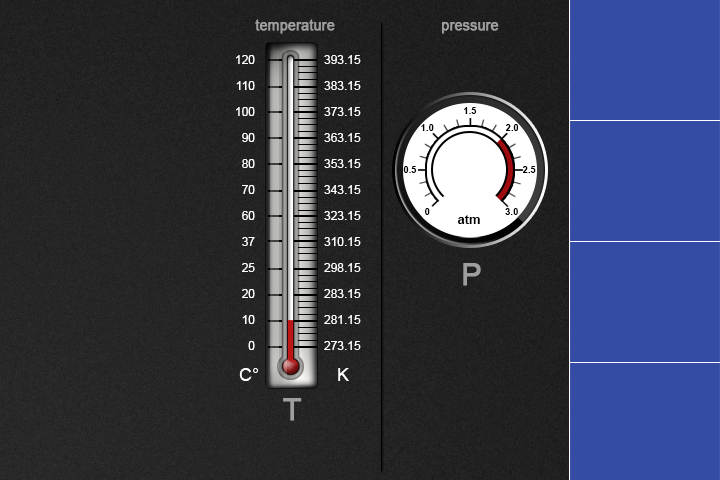
<style>
.page{position:relative;width:720px;height:480px;background:#344ca4}
.page>*{position:absolute;margin:0}
.t1{font:14px "ArialMT";color:#9f9d9d;font-weight:bold}
.t2{font:12px/26px "ArialMT";color:#ffffff}
.t3{font:9.5px "Arial-BoldMT";color:#000000}
.t4{font:13.1px "Arial-BoldMT";color:#000000}
.t5{font:30px "ArialMT";color:#9f9d9d;font-weight:bold}
.t6{font:18px "ArialMT";color:#ffffff}
</style>
<div class="page">
<p class="t1" style="left:255px;top:19px;width:80px;height:15px">temperature</p>
<p class="t1" style="left:442px;top:22px;width:57px;height:12px">pressure</p>
<p class="t2" style="left:236px;top:55px;width:19px;height:295px;text-align:right">120<br>110<br>100<br>90<br>80<br>70<br>60<br>37<br>25<br>20<br>10<br>0</p>
<p class="t2" style="left:324px;top:55px;width:37px;height:295px">393.15<br>383.15<br>373.15<br>363.15<br>353.15<br>343.15<br>323.15<br>310.15<br>298.15<br>283.15<br>281.15<br>273.15</p>
<p class="t3" style="left:464px;top:107px;width:13px;height:7px">1.5</p>
<p class="t3" style="left:421px;top:124px;width:13px;height:7px">1.0</p>
<p class="t3" style="left:505px;top:124px;width:14px;height:7px">2.0</p>
<p class="t3" style="left:403px;top:166px;width:14px;height:7px">0.5</p>
<p class="t3" style="left:522px;top:166px;width:14px;height:7px">2.5</p>
<p class="t3" style="left:425px;top:208px;width:5px;height:7px">0</p>
<p class="t3" style="left:505px;top:208px;width:13px;height:7px">3.0</p>
<p class="t4" style="left:457px;top:215px;width:23px;height:9px">atm</p>
<p class="t5" style="left:463px;top:263px;width:18px;height:23px">P</p>
<p class="t6" style="left:239px;top:368px;width:20px;height:13px">C°</p>
<p class="t6" style="left:338px;top:368px;width:11px;height:13px">K</p>
<p class="t5" style="left:283px;top:398px;width:19px;height:23px">T</p>
</div>
